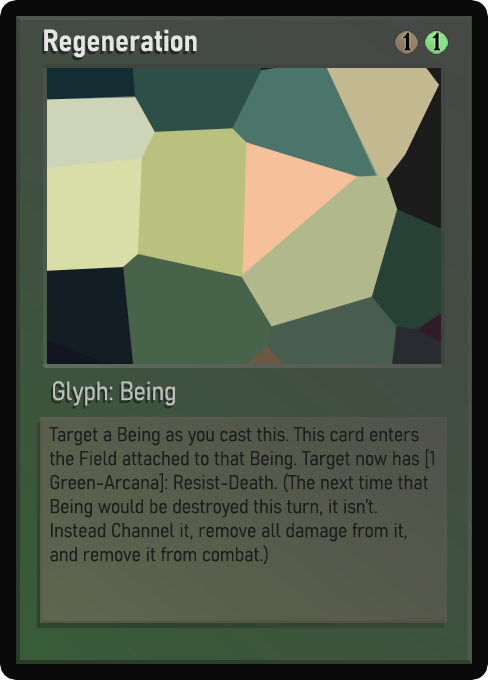
<style>
.page{position:relative;width:488px;height:680px}
.page>*{position:absolute;margin:0}
.t1{font:30px "Bahnschrift-SemiBoldSemiCondensed";color:#f2f2f2;font-weight:bold}
.t2{font:25px "WTRRoycroft";color:#000000;font-weight:bold;scale:1.09 1}
.t3{font:26px "Bahnschrift-LightSemiCondensed";color:#c8c8c8;font-weight:bold}
.t4{font:20px "Bahnschrift-LightSemiCondensed";color:#1e1e1e;font-weight:bold}
</style>
<div class="page">
<p class="t1" style="left:44px;top:29px;width:153px;height:29px;opacity:0.9">Regeneration</p>
<p class="t2" style="left:403px;top:32px;width:8px;height:19px">1</p>
<p class="t2" style="left:432px;top:32px;width:9px;height:19px">1</p>
<p class="t3" style="left:53px;top:381px;width:122px;height:25px;opacity:0.9">Glyph: Being</p>
<p class="t4" style="left:49px;top:427px;width:385px;height:138px">Target a Being as you cast this. This card enters the Field attached to that Being. Target now has [1 Green-Arcana]: Resist-Death. (The next time that Being would be destroyed this turn, it isn’t. Instead Channel it, remove all damage from it, and remove it from combat.)</p>
</div>
